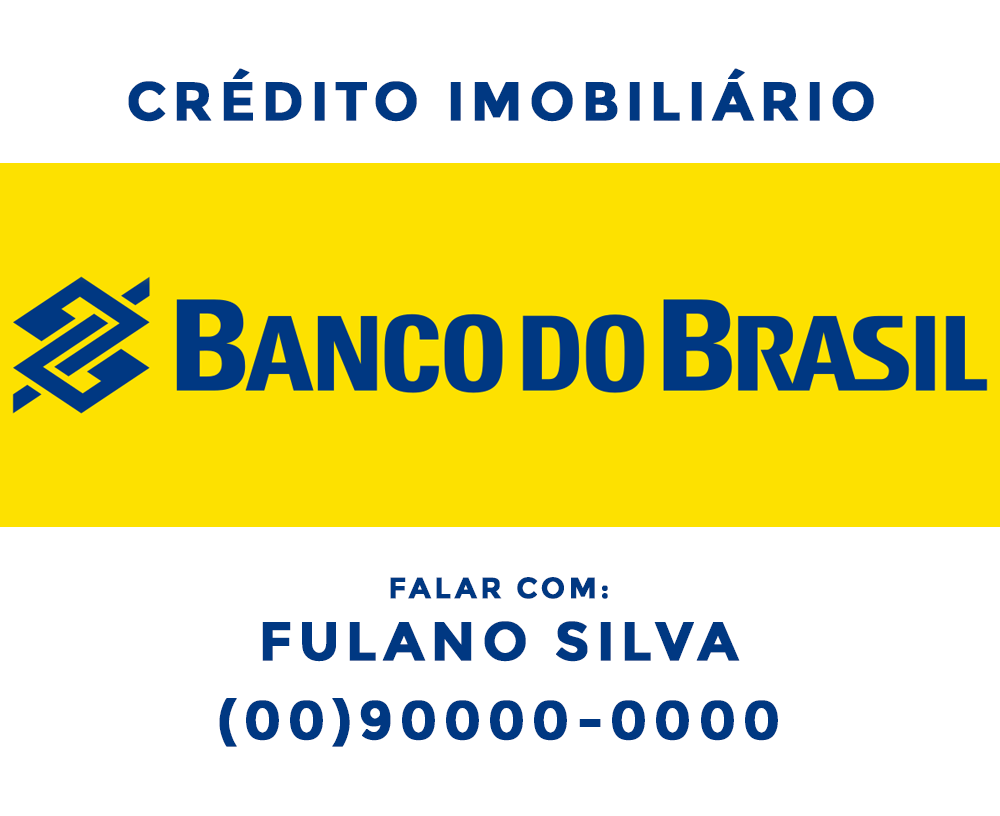
<style>
.page{position:relative;width:1000px;height:816px;background:#ffffff}
.page>*{position:absolute;margin:0}
.t1{font:54.2px "Montserrat-Bold";letter-spacing:0.1em;color:#003882;text-transform:uppercase;font-weight:bold}
.t2{font:29.2px "Montserrat-Bold";letter-spacing:0.1em;color:#003882;text-transform:uppercase;font-weight:bold}
</style>
<div class="page">
<p class="t1" style="left:128px;top:68px;width:746px;height:54px">crédito imobiliário</p>
<p class="t2" style="left:390px;top:577px;width:218px;height:22px">falar com:</p>
<p class="t1" style="left:262px;top:621px;width:478px;height:41px">Fulano Silva</p>
<p class="t1" style="left:219px;top:698px;width:559px;height:49px">(00)90000-0000</p>
</div>
